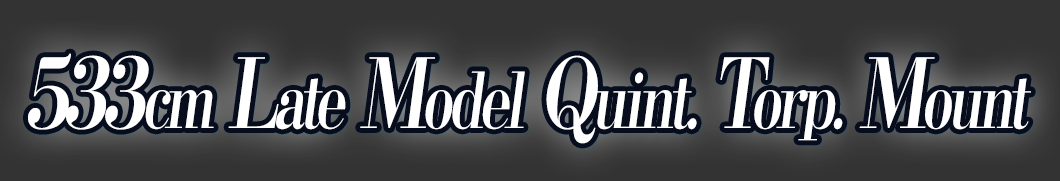
<style>
.page{position:relative;width:1060px;height:181px;background:#333333}
.page>*{position:absolute;margin:0}
.t1{font:76.8px "KochoStd-Heavy";letter-spacing:-0.08em;color:#ffffff;font-style:italic;scale:0.75 1}
.t2{font:96px "KochoStd-Heavy";letter-spacing:-0.08em;color:#ffffff;font-style:italic;scale:0.75 1}
</style>
<div class="page">
<p class="t1" style="left:28px;top:53px;width:1003px;height:91px"><span class="t2">533</span>cm<span class="t2"> L</span>ate<span class="t2"> M</span>odel<span class="t2"> Q</span>uint.<span class="t2"> T</span>orp.<span class="t2"> M</span>ount</p>
</div>
